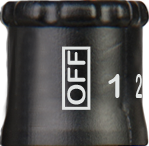
<style>
.page{position:relative;width:149px;height:146px}
.page>*{position:absolute;margin:0}
.t1{font:24.9px "ArialRoundedMTBold";letter-spacing:-0.01em;color:#e1e4e3;scale:1.15 1}
.t2{font:32.5px "ArialRoundedMTBold";letter-spacing:-0.01em;color:#e1e4e3;scale:0.96 1}
.t3{font:32.5px "ArialRoundedMTBold";letter-spacing:-0.01em;color:#e1e4e3;scale:0.36 1}
</style>
<div class="page">
<p class="t1" style="left:67px;top:50px;width:19px;height:55px;rotate:-90deg">OFF</p>
<p class="t2" style="left:108px;top:74px;width:12px;height:24px">1</p>
<p class="t3" style="left:135px;top:74px;width:7px;height:24px">2</p>
</div>
